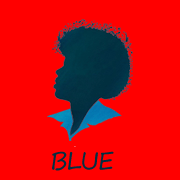
<style>
.page{position:relative;width:180px;height:180px;background:#ff0000}
.page>*{position:absolute;margin:0}
.t1{font:24px "SegoePrint";letter-spacing:-0.06em;color:#022f42}
</style>
<div class="page">
<p class="t1" style="left:52px;top:151px;width:62px;height:20px">BLUE</p>
</div>
